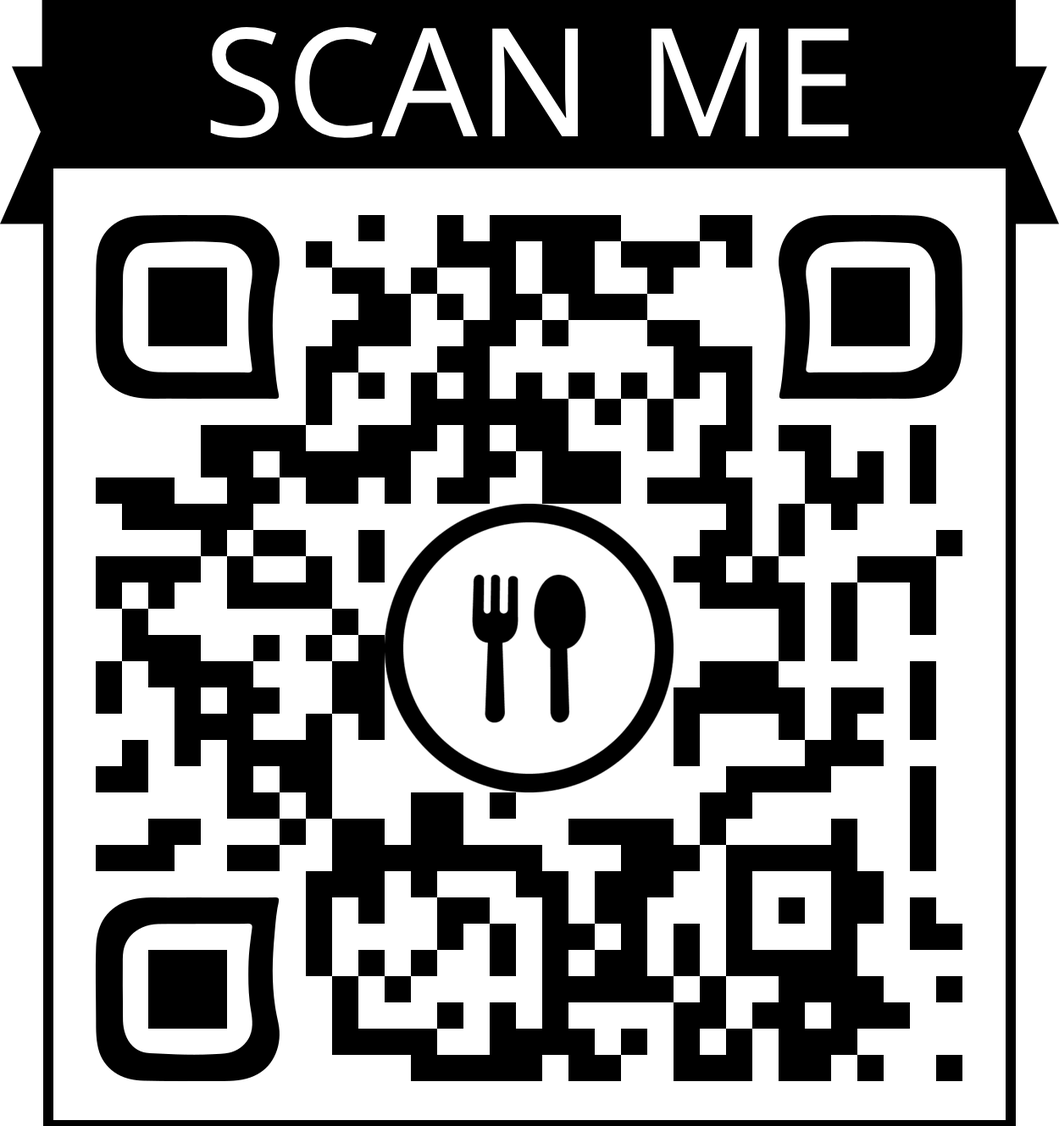
<style>
.page{position:relative;width:1059px;height:1126px;background:#ffffff}
.page>*{position:absolute;margin:0}
.t1{font:150.9px "NotoSansCanadianAboriginal-Regular";color:#ffffff}
</style>
<div class="page">
<p class="t1" style="left:210px;top:26px;width:639px;height:112px">SCAN ME</p>
</div>
